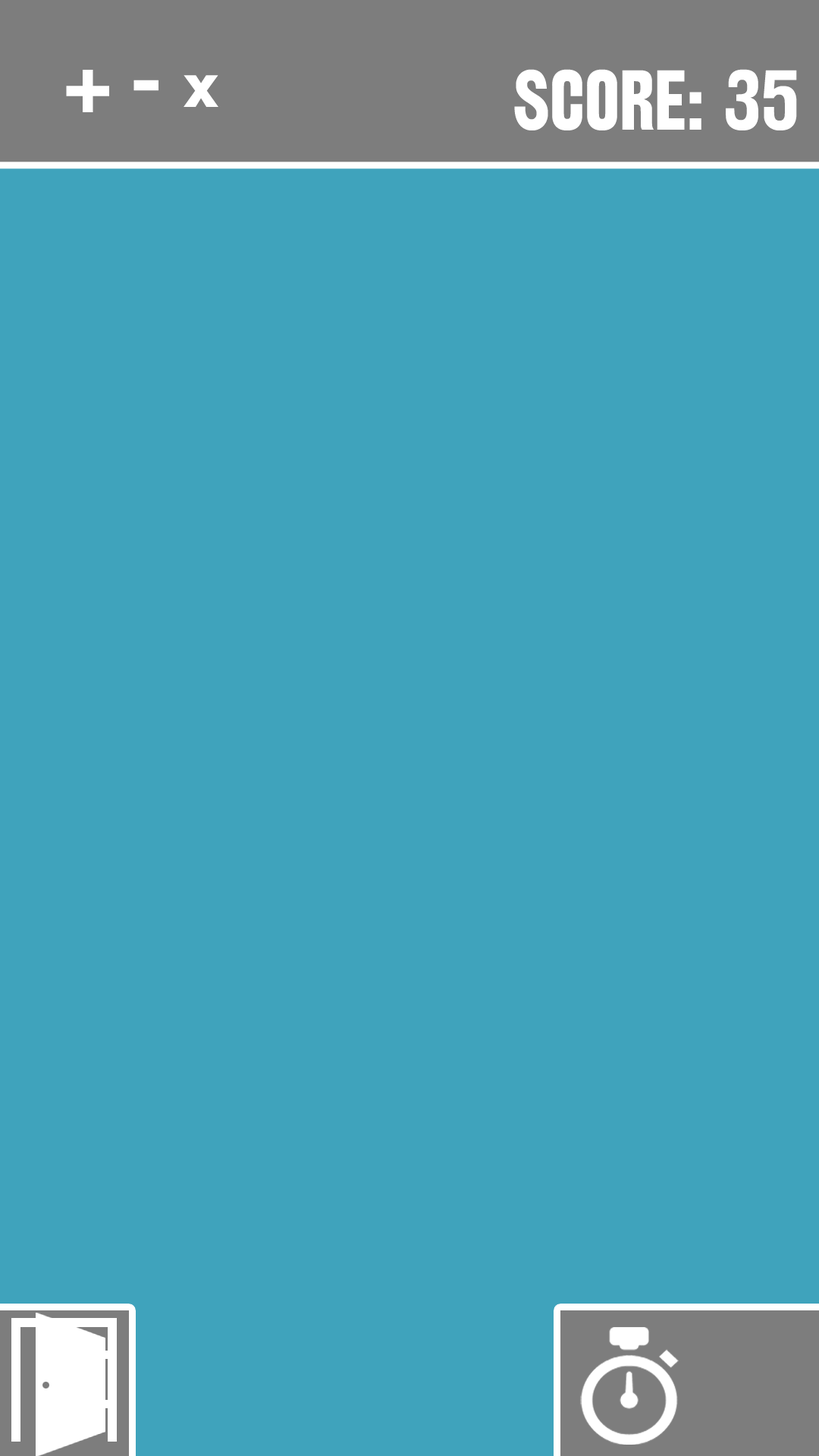
<style>
.page{position:relative;width:819px;height:1456px;background:#3fa3bc}
.page>*{position:absolute;margin:0}
.t1{font:79px "RailroadGothic";color:#ffffff}
.t2{font:42px "RailroadGothic";color:#ffffff;scale:1.88 1}
</style>
<div class="page">
<p class="t1" style="left:66px;top:70px;width:92px;height:42px">+ -</p>
<p class="t2" style="left:184px;top:75px;width:34px;height:32px">x</p>
<p class="t1" style="left:514px;top:69px;width:283px;height:61px">SCORE: 35</p>
</div>
